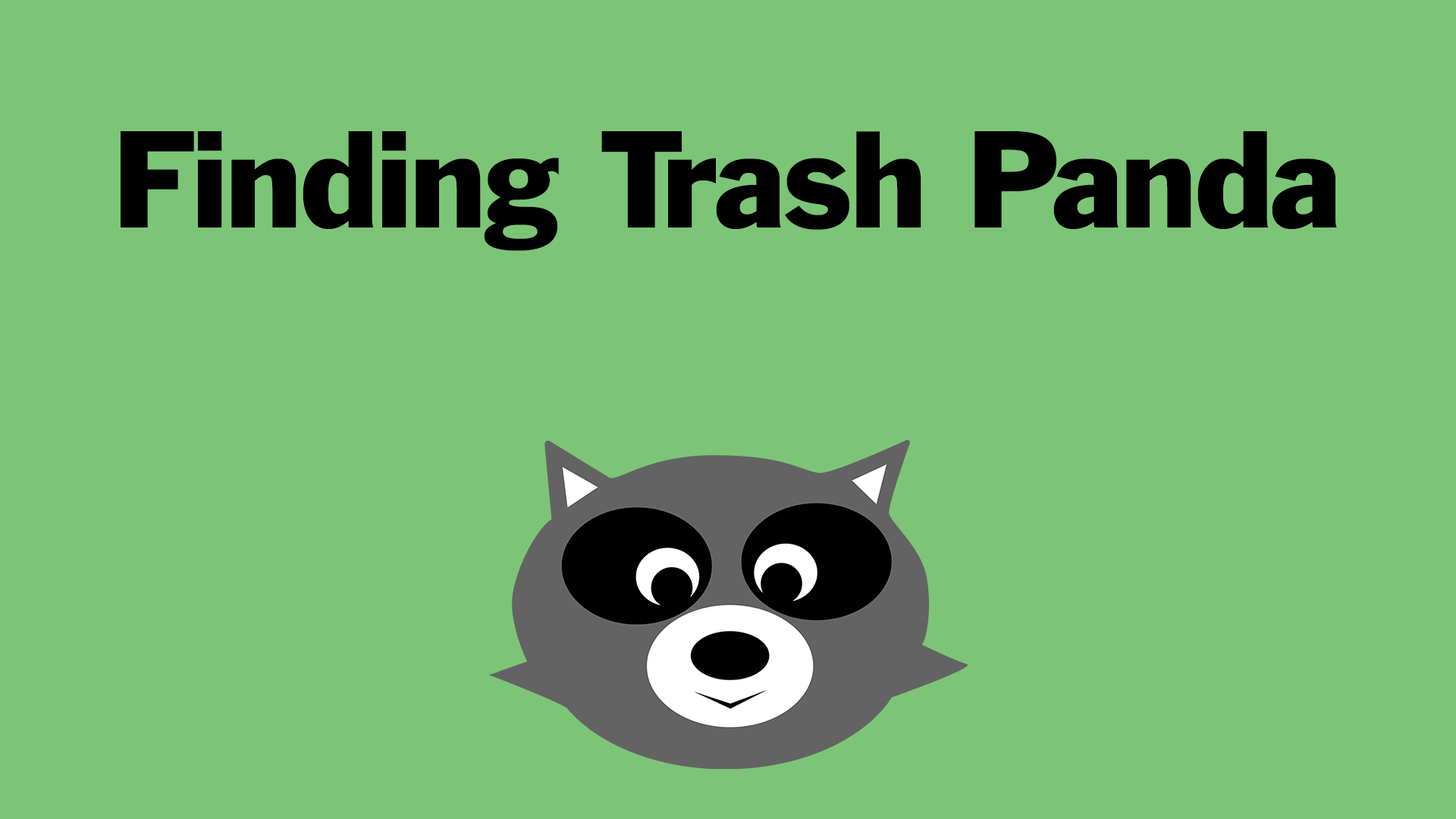
<style>
.page{position:relative;width:1456px;height:819px;background:#7cc576}
.page>*{position:absolute;margin:0}
.t1{font:126.4px "FranklinGothicBT-Roman";letter-spacing:-0.02em;color:#000000}
</style>
<div class="page">
<p class="t1" style="left:121px;top:131px;width:1216px;height:120px">Finding Trash Panda</p>
</div>
